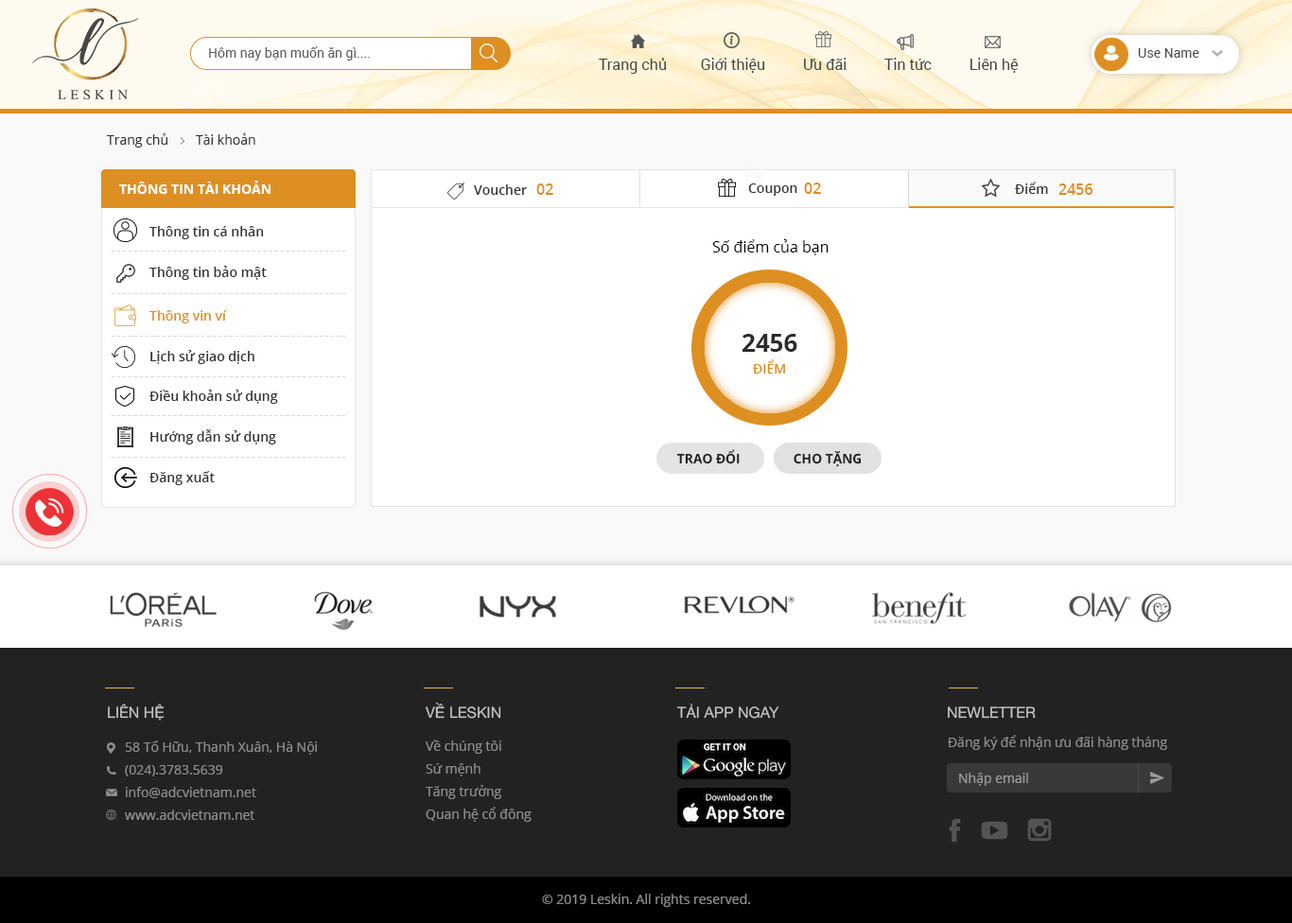
<style>
.page{position:relative;width:1292px;height:923px;background:#ffffff}
.page>*{position:absolute;margin:0}
.t1{font:13.2px "Roboto-Regular";color:#595959}
.t2{font:13.2px "Roboto-Regular";color:#464646}
.t3{font:15.1px "Roboto-Regular";color:#464646}
.t4{font:13.2px "OpenSans";color:#333333}
.t5{font:13.2px "OpenSans-Bold";color:#ffffff;text-transform:uppercase}
.t6{font:13.2px "OpenSans-Semibold";color:#333333}
.t7{font:15.1px "OpenSans-Semibold";color:#dd8f22}
.t8{font:15.1px "OpenSans";color:#000000}
.t9{font:15.1px "OpenSans-Light";letter-spacing:0.05em;color:#d9d9d9}
.t10{font:13.2px "OpenSans-Semibold";color:#dd8f22}
.t11{font:24.6px "OpenSans-Bold";color:#2b2b2b}
.t12{font:13.2px "OpenSans-Semibold";color:#de8f21;text-transform:uppercase}
.t13{font:13.2px "OpenSans-Bold";color:#222020;text-transform:uppercase}
.t14{font:15.1px "HelveticaNeue";color:#c4c4c4;text-transform:uppercase}
.t15{font:13.2px "OpenSans";color:#8c8c8c}
.t16{font:13.2px/22.7px "OpenSans";color:#8c8c8c}
.t17{font:13.2px "OpenSans";color:#9c9c9c}
</style>
<div class="page">
<p class="t1" style="left:209px;top:46px;width:161px;height:15px">Hôm nay bạn muốn ăn gì....</p>
<p class="t2" style="left:1138px;top:48px;width:61px;height:10px">Use Name</p>
<p class="t3" style="left:599px;top:58px;width:419px;height:16px">Trang chủ         Giới thiệu          Ưu đãi          Tin tức          Liên hệ</p>
<p class="t4" style="left:107px;top:133px;width:148px;height:15px">Trang chủ        Tài khoản</p>
<p class="t5" style="left:119px;top:181px;width:151px;height:13px">Thông tin tài khoản</p>
<p class="t6" style="left:474px;top:184px;width:53px;height:11px">Voucher</p>
<p class="t7" style="left:536px;top:183px;width:17px;height:12px">02</p>
<p class="t6" style="left:748px;top:183px;width:49px;height:13px">Coupon</p>
<p class="t7" style="left:804px;top:183px;width:17px;height:11px">02</p>
<p class="t6" style="left:1015px;top:182px;width:33px;height:12px">Điểm</p>
<p class="t7" style="left:1058px;top:183px;width:35px;height:12px">2456</p>
<p class="t6" style="left:149px;top:226px;width:115px;height:13px">Thông tin cá nhân</p>
<p class="t8" style="left:712px;top:239px;width:116px;height:16px">Số điểm của bạn</p>
<p class="t9" style="left:111px;top:251px;width:235px;height:1px">------------------------------------------</p>
<p class="t6" style="left:149px;top:266px;width:118px;height:14px">Thông tin bảo mật</p>
<p class="t9" style="left:111px;top:293px;width:235px;height:1px">------------------------------------------</p>
<p class="t10" style="left:149px;top:310px;width:78px;height:13px">Thông vin ví</p>
<p class="t9" style="left:111px;top:336px;width:235px;height:1px">------------------------------------------</p>
<p class="t11" style="left:742px;top:334px;width:55px;height:18px">2456</p>
<p class="t6" style="left:150px;top:350px;width:104px;height:14px">Lịch sử giao dịch</p>
<p class="t12" style="left:753px;top:359px;width:32px;height:15px">Điểm</p>
<p class="t9" style="left:111px;top:376px;width:235px;height:1px">------------------------------------------</p>
<p class="t6" style="left:149px;top:390px;width:129px;height:14px">Điều khoản sử dụng</p>
<p class="t9" style="left:111px;top:415px;width:235px;height:1px">------------------------------------------</p>
<p class="t6" style="left:150px;top:429px;width:126px;height:15px">Hướng dẫn sử dụng</p>
<p class="t13" style="left:676px;top:449px;width:64px;height:15px">Trao đổi</p>
<p class="t9" style="left:111px;top:457px;width:235px;height:1px">------------------------------------------</p>
<p class="t13" style="left:793px;top:450px;width:69px;height:17px">CHo tặng</p>
<p class="t6" style="left:149px;top:471px;width:66px;height:14px">Đăng xuất</p>
<p class="t14" style="left:426px;top:702px;width:75px;height:17px">về leskin</p>
<p class="t14" style="left:108px;top:704px;width:57px;height:17px">Liên hệ</p>
<p class="t14" style="left:677px;top:704px;width:102px;height:15px">Tải App ngay</p>
<p class="t14" style="left:948px;top:706px;width:88px;height:13px">newletter</p>
<p class="t15" style="left:948px;top:735px;width:219px;height:15px">Đăng ký để nhận ưu đãi hàng tháng</p>
<p class="t16" style="left:125px;top:741px;width:192px;height:79px">58 Tố Hữu, Thanh Xuân, Hà Nội<br>(024).3783.5639<br>info@adcvietnam.net <br>www.adcvietnam.net</p>
<p class="t16" style="left:426px;top:740px;width:105px;height:82px">Về chúng tôi<br>Sứ mệnh<br>Tăng trưởng<br>Quan hệ cổ đông</p>
<p class="t17" style="left:959px;top:773px;width:69px;height:13px">Nhập email</p>
<p class="t15" style="left:542px;top:894px;width:208px;height:13px">© 2019 Leskin. All rights reserved.</p>
</div>
